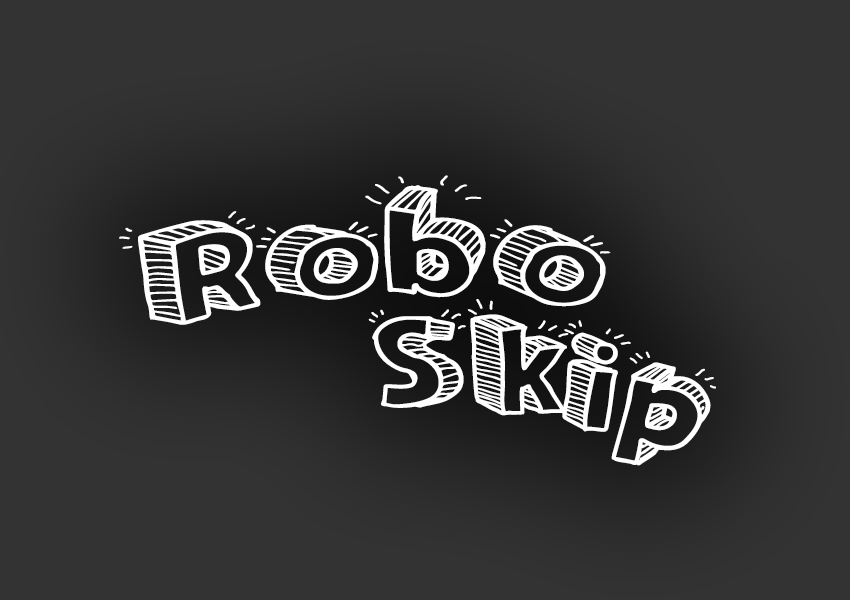
<style>
.page{position:relative;width:850px;height:600px;background:#333333}
.page>*{position:absolute;margin:0}
.t1{font:138px/123px "Sketch3D";color:#ffffff}
</style>
<div class="page">
<p class="t1" style="left:119px;top:175px;width:597px;height:291px;rotate:6deg">Robo<br>     Skip</p>
</div>
